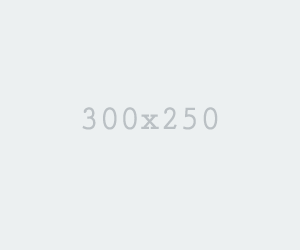
<style>
.page{position:relative;width:300px;height:250px;background:#ecf0f1}
.page>*{position:absolute;margin:0}
.t1{font:34.9px "PrestigeEliteStd-Bd";color:#bac0c4;font-weight:bold;scale:0.92 1}
</style>
<div class="page">
<p class="t1" style="left:82px;top:107px;width:136px;height:23px">300x250</p>
</div>
